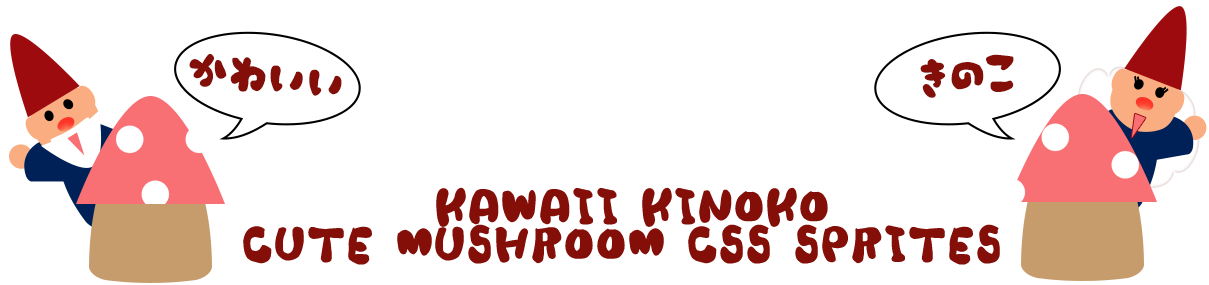
<style>
.page{position:relative;width:1209px;height:285px;background:#ffffff}
.page>*{position:absolute;margin:0}
.t1{font:41.7px "Mikiyu-Font-Mokomor-kuro";color:#830f08;text-transform:uppercase}
.t2{font:41.7px/37.5px "Mikiyu-Font-Mokomor-kuro";color:#830f08;text-transform:uppercase}
</style>
<div class="page">
<p class="t1" style="left:189px;top:54px;width:153px;height:42px;rotate:6deg">かわいい</p>
<p class="t1" style="left:920px;top:54px;width:94px;height:44px;rotate:-5deg">きのこ</p>
<p class="t2" style="left:243px;top:187px;width:757px;height:78px;text-align:center">Kawaii Kinoko<br>Cute mushroom CSS sprites</p>
</div>
